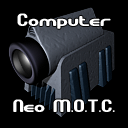
<style>
.page{position:relative;width:128px;height:128px;background:#000000}
.page>*{position:absolute;margin:0}
.t1{font:18px "GravitateBRK";color:#ffffff}
.t2{font:18px "GravitateBRK";letter-spacing:-0.025em;color:#ffffff}
</style>
<div class="page">
<p class="t1" style="left:17px;top:13px;width:94px;height:16px">Computer</p>
<p class="t1" style="left:13px;top:99px;width:102px;height:13px"><span class="t2">Neo </span>M.O.T.C.</p>
</div>
